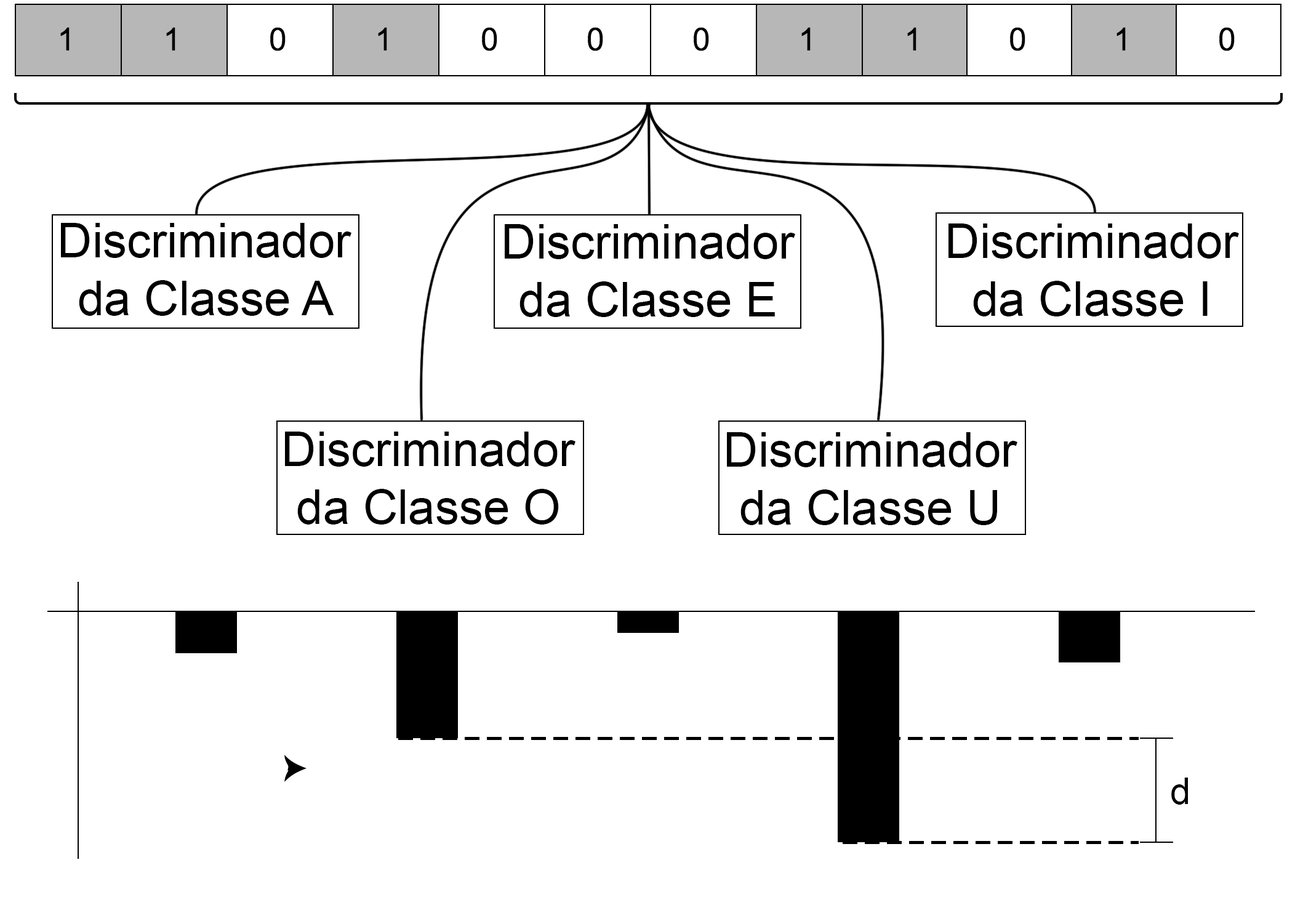
<style>
.page{position:relative;width:1295px;height:921px;background:#ffffff}
.page>*{position:absolute;margin:0}
.t1{font:48px "ArialMT";color:#000000}
.t2{font:36.9px "ArialMT";color:#000000}
</style>
<div class="page">
<p class="t1" style="left:61px;top:223px;width:290px;height:93px;text-align:center">Discriminador<br>da Classe A</p>
<p class="t1" style="left:505px;top:224px;width:290px;height:93px;text-align:center">Discriminador<br>da Classe E</p>
<p class="t1" style="left:948px;top:223px;width:291px;height:93px;text-align:center">Discriminador<br>da Classe I</p>
<p class="t1" style="left:285px;top:431px;width:290px;height:93px;text-align:center">Discriminador<br>da Classe O</p>
<p class="t1" style="left:727px;top:432px;width:290px;height:93px;text-align:center">Discriminador<br>da Classe U</p>
<p class="t2" style="left:1171px;top:777px;width:17px;height:27px">d</p>
</div>
